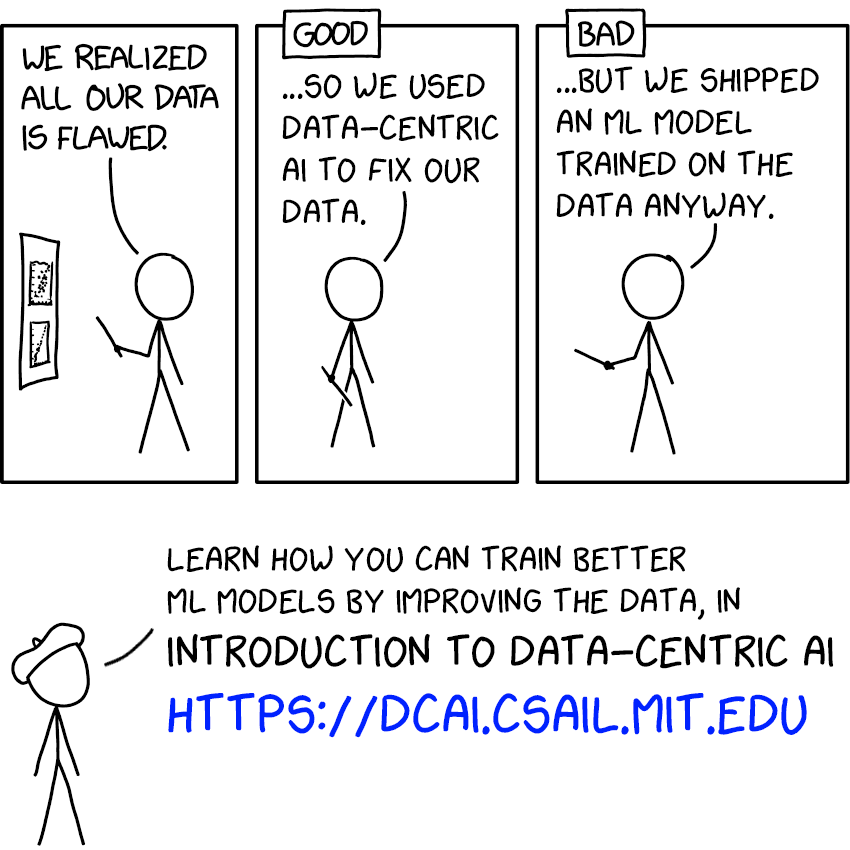
<style>
.page{position:relative;width:850px;height:850px;background:#ffffff}
.page>*{position:absolute;margin:0}
.t1{font:35px "xkcdScript";color:#000000}
.t2{font:45px "xkcdScript";color:#000000}
.t3{font:55px "xkcdScript";color:#0022ff}
</style>
<div class="page">
<p class="t1" style="left:282px;top:72px;width:217px;height:153px">...SO WE USED<br>DATA-CENTRIC<br>AI TO FIX OUR<br>DATA.</p>
<p class="t1" style="left:556px;top:66px;width:263px;height:153px">...BUT WE SHIPPED<br>AN ML MODEL<br>TRAINED ON THE<br>DATA ANYWAY.</p>
<p class="t1" style="left:167px;top:545px;width:667px;height:193px">LEARN HOW YOU CAN TRAIN BETTER<br>ML MODELS BY IMPROVING THE DATA, IN<br><span class="t2">INTRODUCTION TO DATA-CENTRIC AI<br></span><span class="t3">HTTPS://DCAI.CSAIL.MIT.EDU</span></p>
</div>
